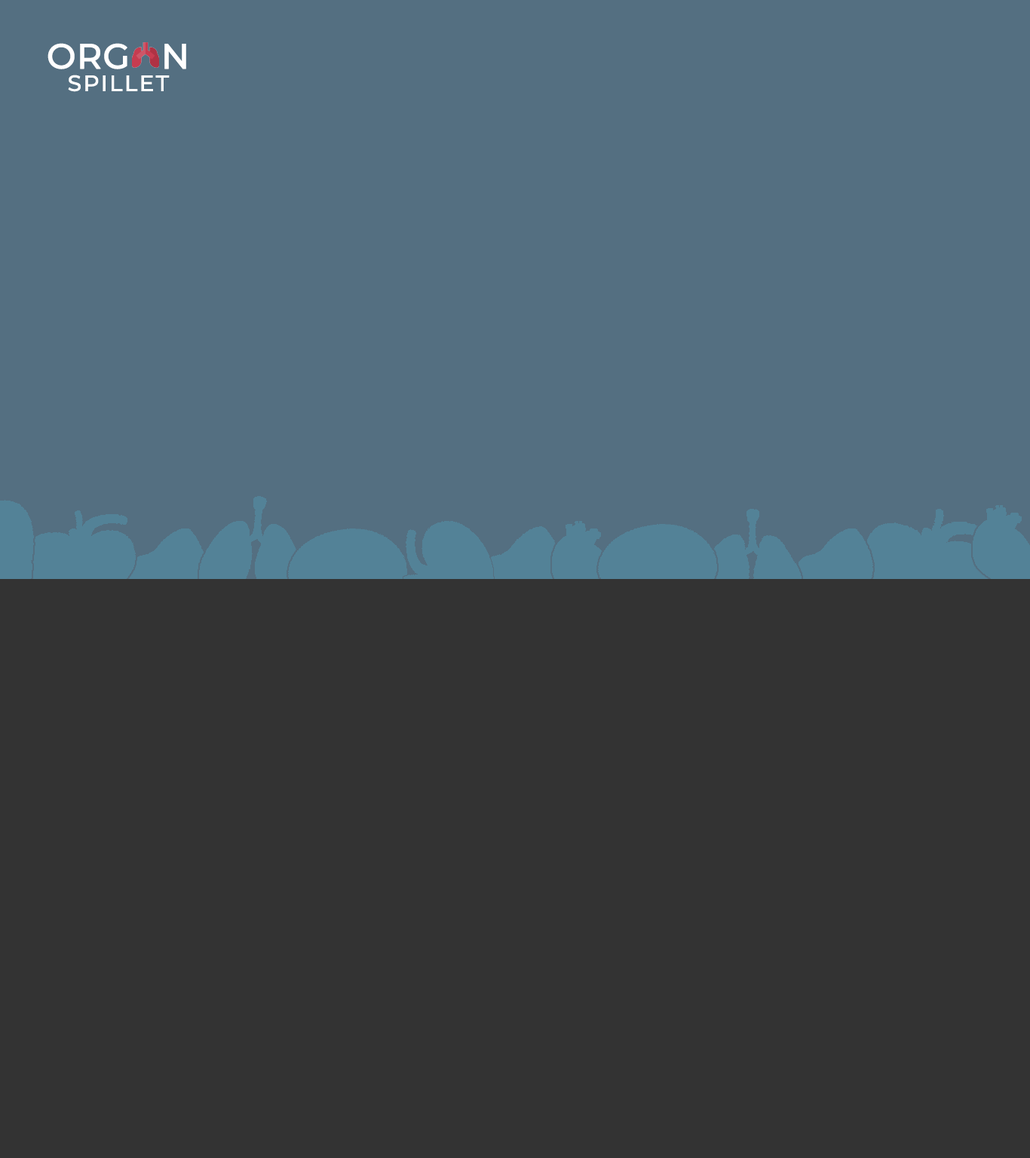
<style>
.page{position:relative;width:1030px;height:1158px;background:#333333}
.page>*{position:absolute;margin:0}
.t1{font:34.7px "Montserrat-Medium";color:#ffffff;font-weight:bold}
.t2{font:22.3px "Montserrat-Medium";letter-spacing:0.05em;color:#ffffff;font-weight:bold}
</style>
<div class="page">
<p class="t1" style="left:47px;top:43px;width:139px;height:26px">ORG   N</p>
<p class="t2" style="left:68px;top:75px;width:102px;height:17px">SPILLET</p>
</div>
